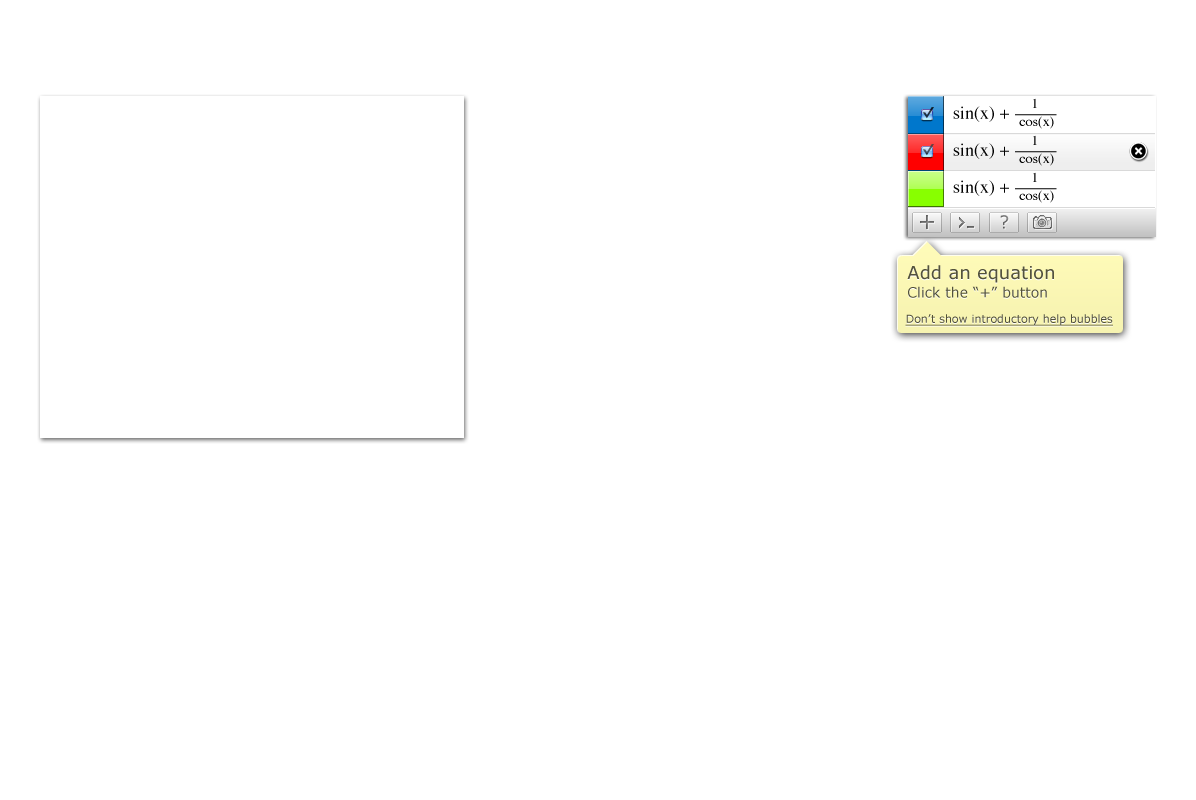
<style>
.page{position:relative;width:1196px;height:800px;background:#ffffff}
.page>*{position:absolute;margin:0}
.t1{font:14px "Times-Roman"}
.t2{font:14px "Times-Roman";color:#000000}
.t3{font:18px "Verdana";color:#6e6e6e}
.t4{font:18px "Verdana";color:#53523c}
.t5{font:14px "Verdana";color:#52513b}
.t6{font:11px "Verdana";color:#51503a;text-decoration:underline}
</style>
<div class="page">
<p class="t1" style="left:1033px;top:98px;width:4px;height:10px">1</p>
<p class="t2" style="left:1019px;top:116px;width:35px;height:13px">cos(x)</p>
<p class="t1" style="left:1033px;top:135px;width:4px;height:10px">1</p>
<p class="t2" style="left:1019px;top:153px;width:35px;height:13px">cos(x)</p>
<p class="t1" style="left:1033px;top:172px;width:4px;height:10px">1</p>
<p class="t2" style="left:1019px;top:190px;width:35px;height:13px">cos(x)</p>
<p class="t3" style="left:1000px;top:215px;width:9px;height:14px">?</p>
<p class="t4" style="left:907px;top:265px;width:147px;height:18px">Add an equation</p>
<p class="t5" style="left:908px;top:286px;width:139px;height:12px">Click the “+” button</p>
<p class="t6" style="left:905px;top:314px;width:208px;height:12px">Don’t show introductory help bubbles</p>
</div>
